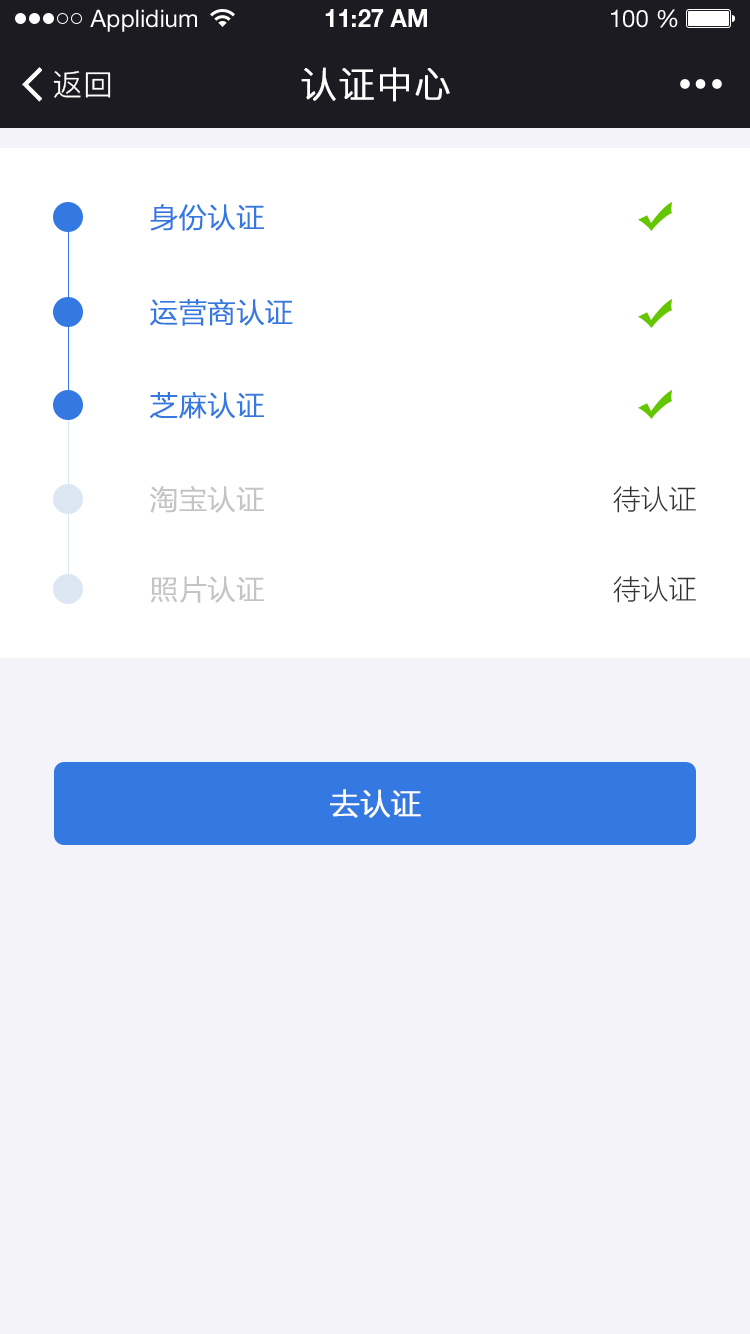
<style>
.page{position:relative;width:750px;height:1334px;background:#f4f3f9}
.page>*{position:absolute;margin:0}
.t1{font:24px "HelveticaNeueLTStd-Roman";color:#ffffff}
.t2{font:24px "HelveticaNeueLTStd-Bd";color:#ffffff}
.t3{font:30px "PingFang-SC-Regular";letter-spacing:0.025em;color:#ffffff}
.t4{font:36px "PingFang-SC-Regular";letter-spacing:0.025em;color:#ffffff;font-weight:bold}
.t5{font:28px "FZLTXHK--GBK1-0";color:#3479e1;font-weight:bold}
.t6{font:28px "FZLTXHK--GBK1-0";color:#c4c4c4;font-weight:bold}
.t7{font:28px "FZLTXHK--GBK1-0";color:#333333}
.t8{font:30px "FZLTXHK--GBK1-0";color:#ffffff;font-weight:bold}
</style>
<div class="page">
<p class="t1" style="left:90px;top:9px;width:107px;height:23px">Applidium</p>
<p class="t2" style="left:325px;top:9px;width:102px;height:18px">11:27 AM</p>
<p class="t1" style="left:611px;top:9px;width:67px;height:19px">100 %</p>
<p class="t3" style="left:53px;top:71px;width:58px;height:27px">返回</p>
<p class="t4" style="left:301px;top:67px;width:149px;height:35px">认证中心</p>
<p class="t5" style="left:150px;top:204px;width:114px;height:27px">身份认证</p>
<p class="t5" style="left:150px;top:299px;width:143px;height:27px">运营商认证</p>
<p class="t5" style="left:150px;top:392px;width:114px;height:27px">芝麻认证</p>
<p class="t6" style="left:150px;top:486px;width:114px;height:27px">淘宝认证</p>
<p class="t7" style="left:613px;top:486px;width:83px;height:27px">待认证</p>
<p class="t6" style="left:151px;top:576px;width:113px;height:27px">照片认证</p>
<p class="t7" style="left:613px;top:576px;width:83px;height:27px">待认证</p>
<p class="t8" style="left:330px;top:789px;width:91px;height:29px">去认证</p>
</div>
